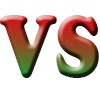
<style>
.page{position:relative;width:100px;height:100px;background:#ffffff}
.page>*{position:absolute;margin:0}
.t1{font:91.8px "CooperBlack";scale:0.77 1}
</style>
<div class="page">
<p class="t1" style="left:0px;top:15px;width:99px;height:63px">VS</p>
</div>
